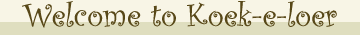
<style>
.page{position:relative;width:360px;height:35px;background:#f8f5e6}
.page>*{position:absolute;margin:0}
.t1{font:33.3px "CurlzMT";color:#584818}
</style>
<div class="page">
<p class="t1" style="left:22px;top:1px;width:315px;height:27px">Welcome to Koek-e-loer</p>
</div>
